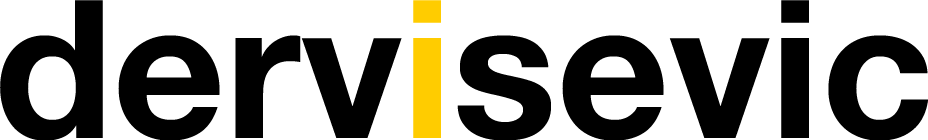
<style>
.page{position:relative;width:928px;height:140px;background:#ffffff}
.page>*{position:absolute;margin:0}
.t1{font:193.1px "HelveticaNeue-Bold";color:#000000}
.t2{font:193.1px "HelveticaNeue-Bold";color:#ffcc00}
</style>
<div class="page">
<p class="t1" style="left:0px;top:0px;width:929px;height:141px">derv<span class="t2">i</span>sevic</p>
</div>
